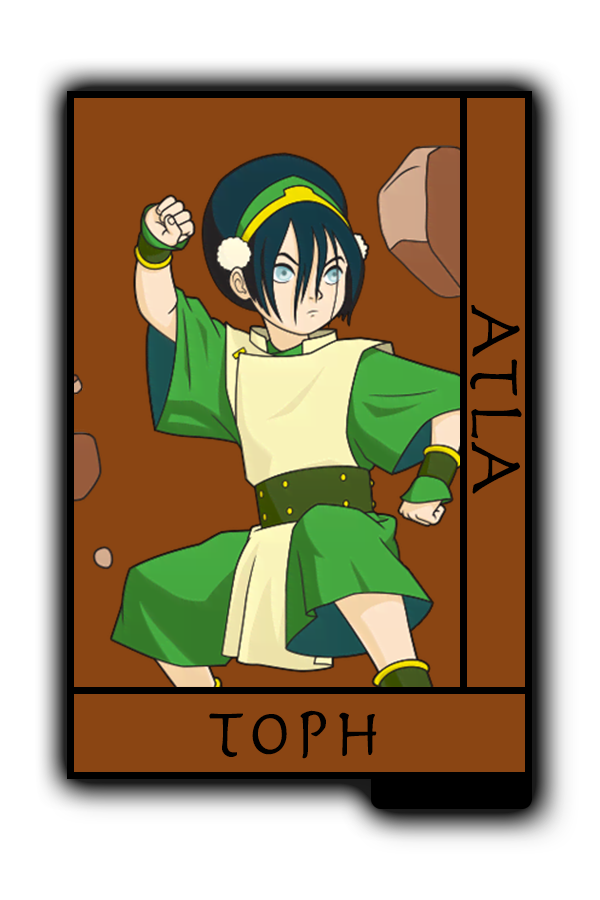
<style>
.page{position:relative;width:600px;height:900px;background:#8a4513}
.page>*{position:absolute;margin:0}
.t1{font:80.7px "Herculanum";color:#000000}
.t2{font:75px "Herculanum";color:#000000}
</style>
<div class="page">
<p class="t1" style="left:470px;top:305px;width:52px;height:189px;rotate:90deg">ATLA</p>
<p class="t2" style="left:209px;top:710px;width:168px;height:49px">Toph</p>
</div>
